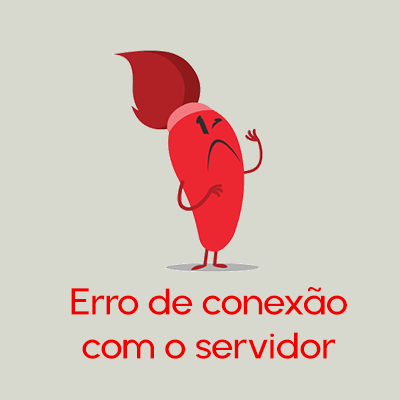
<style>
.page{position:relative;width:400px;height:400px;background:#d7d9ce}
.page>*{position:absolute;margin:0}
.t1{font:37.2px/44px "Urbanist-SemiBold";letter-spacing:-0.02em;color:#f20000;scale:1.08 1}
</style>
<div class="page">
<p class="t1" style="left:71px;top:287px;width:276px;height:72px;text-align:center">Erro de conexão<br>com o servidor</p>
</div>
